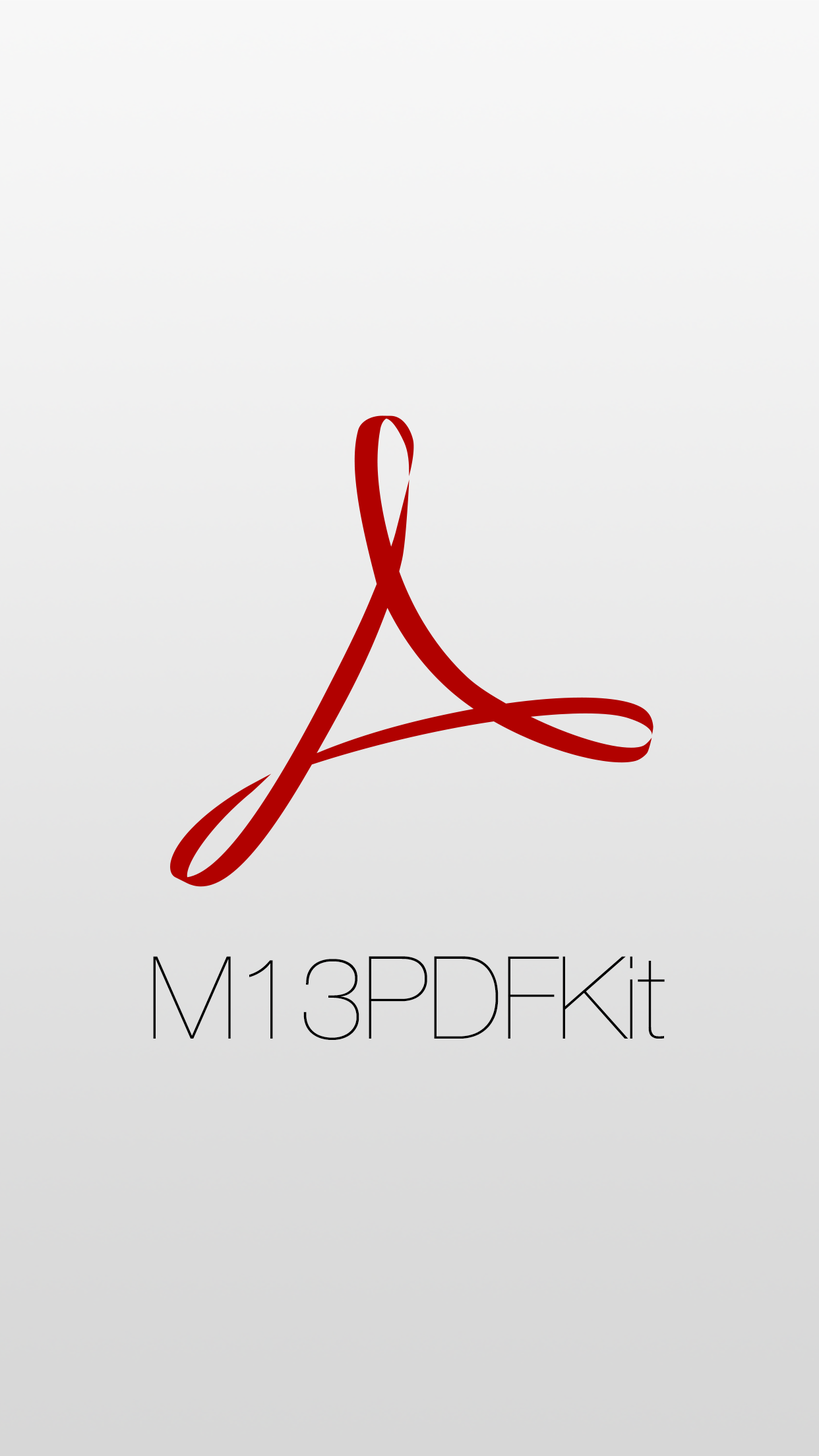
<style>
.page{position:relative;width:819px;height:1456px}
.page>*{position:absolute;margin:0}
.t1{font:115.1px "HelveticaNeue-UltraLight";letter-spacing:-0.007em;color:#000000}
</style>
<div class="page">
<p class="t1" style="left:153px;top:956px;width:512px;height:84px">M13PDFKit</p>
</div>
